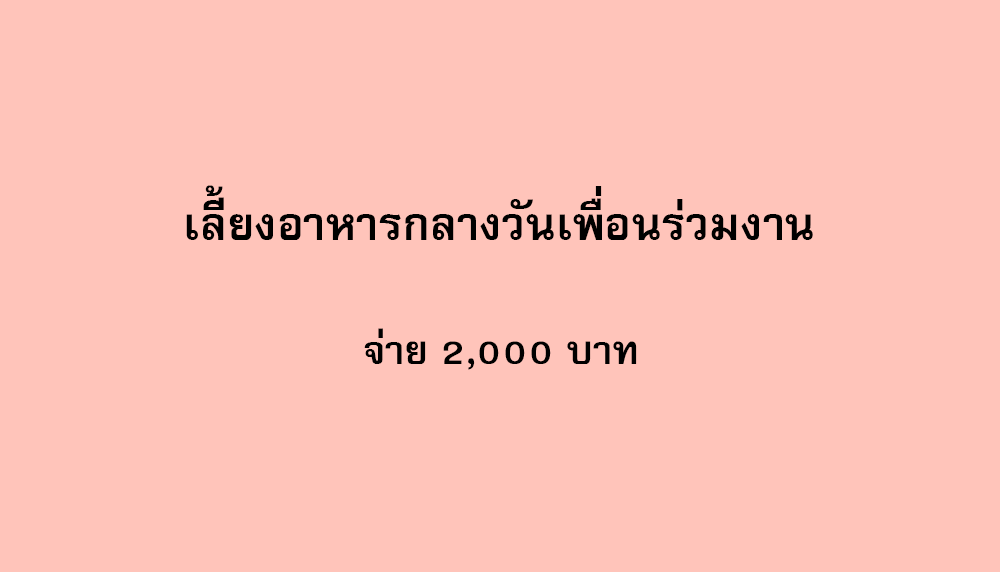
<style>
.page{position:relative;width:1000px;height:572px;background:#ffc4ba}
.page>*{position:absolute;margin:0}
.t1{font:64px "FreesiaUPCBold";color:#000000}
.t2{font:56px "FreesiaUPCBold";color:#000000}
</style>
<div class="page">
<p class="t1" style="left:186px;top:185px;width:627px;height:55px">เลี้ยงอาหารกลางวันเพื่อนร่วมงาน</p>
<p class="t2" style="left:364px;top:328px;width:273px;height:42px">จ่าย 2,000 บาท</p>
</div>
